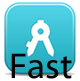
<style>
.page{position:relative;width:80px;height:81px;background:#ffffff}
.page>*{position:absolute;margin:0}
.t1{font:36px "MyriadWebPro";color:#050506}
</style>
<div class="page">
<p class="t1" style="left:11px;top:53px;width:61px;height:26px">Fast</p>
</div>
